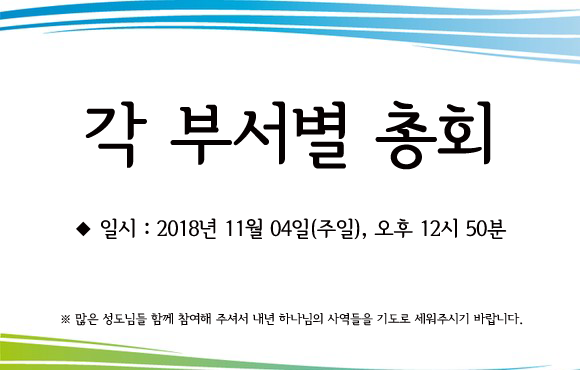
<style>
.page{position:relative;width:580px;height:370px;background:#ffffff}
.page>*{position:absolute;margin:0}
.t1{font:72px "SeoulHangangB";letter-spacing:-0.02em;color:#050000}
.t2{font:13px/21.9px "SeoulHangangB";letter-spacing:-0.02em;color:#050000}
.t3{font:22px/21.9px "SeoulHangangB";letter-spacing:-0.02em;color:#050000}
</style>
<div class="page">
<p class="t1" style="left:85px;top:100px;width:406px;height:70px">각 부서별 총회</p>
<p class="t2" style="left:61px;top:218px;width:462px;height:108px"><span class="t3">                                <br>                                   ◆ 일시 : 2018년 11월 04일(주일), 오후 12시 50분   <br>                             <br>                                      <br><br>                                 </span>※ 많은 성도님들 함께 참여해 주셔서 내년 하나님의 사역들을 기도로 세워주시기 바랍니다.</p>
</div>
